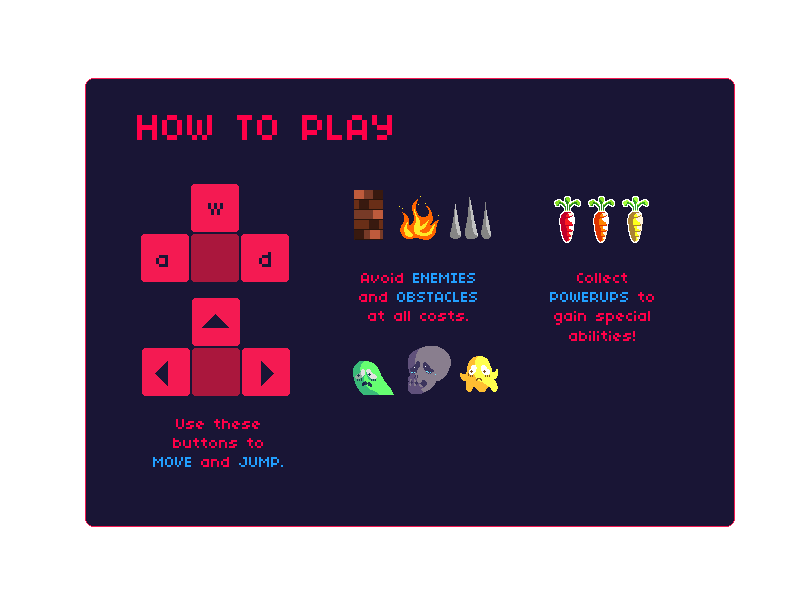
<style>
.page{position:relative;width:800px;height:600px;background:#191535}
.page>*{position:absolute;margin:0}
.t1{font:40px "04b03";color:#ff0048}
.t2{font:16px "04b03";color:#ff0048}
.t3{font:16px "04b03";color:#229fff}
</style>
<div class="page">
<p class="t1" style="left:137px;top:115px;width:255px;height:25px">HOW TO PLAY</p>
<p class="t2" style="left:359px;top:273px;width:118px;height:48px;text-align:center">Avoid <span class="t3">ENEMIES</span> and <span class="t3">OBSTACLES</span> at all costs.</p>
<p class="t2" style="left:550px;top:273px;width:104px;height:68px;text-align:center">Collect <span class="t3">POWERUPS </span>to gain special abilities!</p>
<p class="t2" style="left:153px;top:419px;width:130px;height:48px;text-align:center">Use these buttons to <span class="t3">MOVE</span> and <span class="t3">JUMP.</span></p>
</div>
